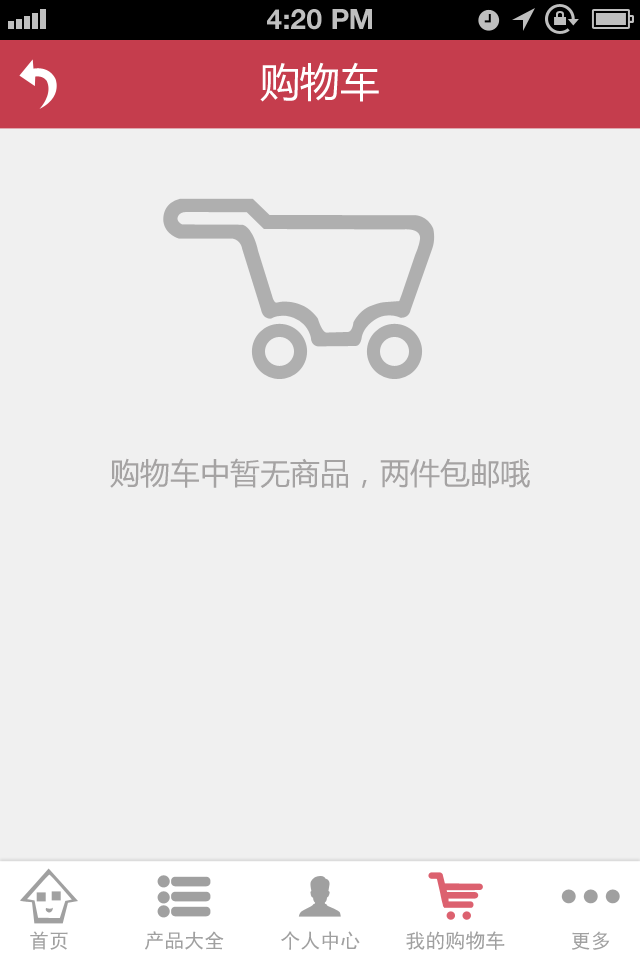
<style>
.page{position:relative;width:640px;height:960px;background:#f0f0f0}
.page>*{position:absolute;margin:0}
.t1{font:28px "HelveticaNeue-Bold";color:#bfbfbf;text-transform:uppercase}
.t2{font:40px "MicrosoftYaHei";color:#ffffff;text-transform:uppercase}
.t3{font:30px "MicrosoftYaHei";color:#a5a3a3;text-transform:uppercase}
.t4{font:20px "SimHei";color:#a0a0a0}
</style>
<div class="page">
<p class="t1" style="left:267px;top:9px;width:105px;height:21px">4:20 PM</p>
<p class="t2" style="left:260px;top:62px;width:119px;height:40px">购物车</p>
<p class="t3" style="left:110px;top:458px;width:420px;height:30px">购物车中暂无商品，两件包邮哦</p>
<p class="t4" style="left:30px;top:931px;width:38px;height:19px">首页</p>
<p class="t4" style="left:145px;top:931px;width:79px;height:19px">产品大全</p>
<p class="t4" style="left:281px;top:931px;width:79px;height:19px">个人中心</p>
<p class="t4" style="left:406px;top:931px;width:99px;height:19px">我的购物车</p>
<p class="t4" style="left:572px;top:931px;width:38px;height:19px">更多</p>
</div>
